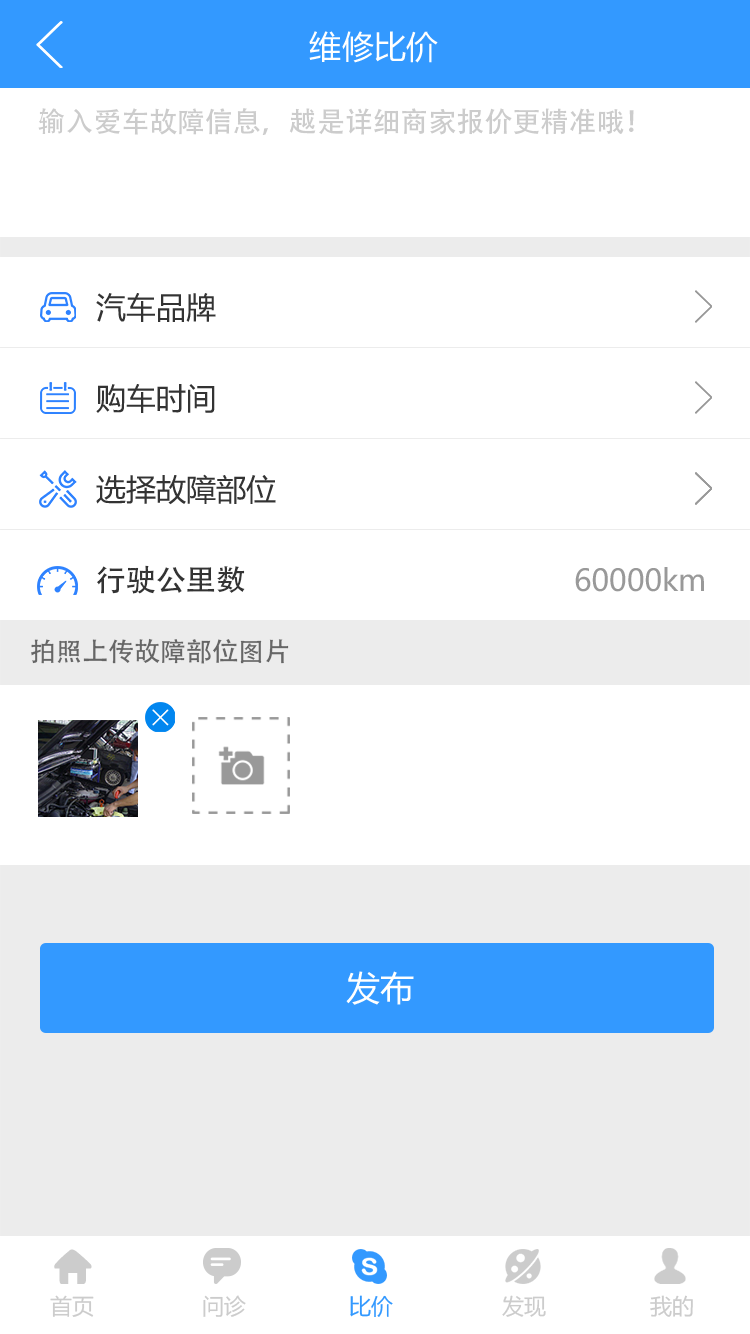
<style>
.page{position:relative;width:750px;height:1334px;background:#ffffff}
.page>*{position:absolute;margin:0}
.t1{font:32px "MicrosoftYaHei";color:#ffffff}
.t2{font:28px "AdobeHeitiStd-Regular";color:#cccccc}
.t3{font:30px "MicrosoftYaHei";color:#333333}
.t4{font:30px "AdobeHeitiStd-Regular";color:#333333}
.t5{font:30px "MicrosoftYaHei";color:#999999}
.t6{font:26px "AdobeHeitiStd-Regular";color:#666666}
.t7{font:34px "MicrosoftYaHei";color:#ffffff}
.t8{font:22px "MicrosoftYaHei";color:#cccccc}
.t9{font:22px "MicrosoftYaHei";color:#3399ff}
</style>
<div class="page">
<p class="t1" style="left:309px;top:31px;width:129px;height:32px">维修比价</p>
<p class="t2" style="left:38px;top:108px;width:596px;height:27px">输入爱车故障信息，越是详细商家报价更精准哦！</p>
<p class="t3" style="left:96px;top:293px;width:120px;height:29px">汽车品牌</p>
<p class="t3" style="left:96px;top:384px;width:119px;height:29px">购车时间</p>
<p class="t3" style="left:96px;top:474px;width:180px;height:31px">选择故障部位</p>
<p class="t4" style="left:97px;top:565px;width:148px;height:29px">行驶公里数</p>
<p class="t5" style="left:575px;top:567px;width:129px;height:25px">60000km</p>
<p class="t6" style="left:31px;top:638px;width:258px;height:26px">拍照上传故障部位图片</p>
<p class="t7" style="left:346px;top:971px;width:68px;height:34px">发布</p>
<p class="t8" style="left:50px;top:1295px;width:44px;height:22px">首页</p>
<p class="t8" style="left:203px;top:1295px;width:43px;height:22px">问诊</p>
<p class="t9" style="left:350px;top:1295px;width:43px;height:22px">比价</p>
<p class="t8" style="left:502px;top:1295px;width:44px;height:22px">发现</p>
<p class="t8" style="left:650px;top:1295px;width:43px;height:22px">我的</p>
</div>
